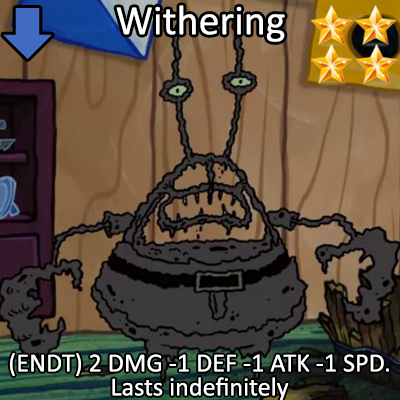
<style>
.page{position:relative;width:400px;height:400px}
.page>*{position:absolute;margin:0}
.t1{font:72px "Calibri";color:#ffffff}
.t2{font:45px/24px "Calibri";color:#ffffff}
</style>
<div class="page">
<p class="t1" style="left:116px;top:5px;width:169px;height:37px">Withering</p>
<p class="t2" style="left:10px;top:353px;width:379px;height:48px;text-align:center">(ENDT) 2 DMG -1 DEF -1 ATK -1 SPD.<br>Lasts indefinitely</p>
</div>
